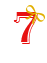
<style>
.page{position:relative;width:47px;height:63px;background:#ffffff}
.page>*{position:absolute;margin:0}
.t1{font:48px "Algerian";color:#e71212}
</style>
<div class="page">
<p class="t1" style="left:13px;top:12px;width:25px;height:32px">7</p>
</div>
